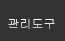
<style>
.page{position:relative;width:65px;height:41px;background:#333333}
.page>*{position:absolute;margin:0}
.t1{font:12px "Gulim"}
</style>
<div class="page">
<p class="t1" style="left:8px;top:19px;width:47px;height:10px">관리도구</p>
</div>
